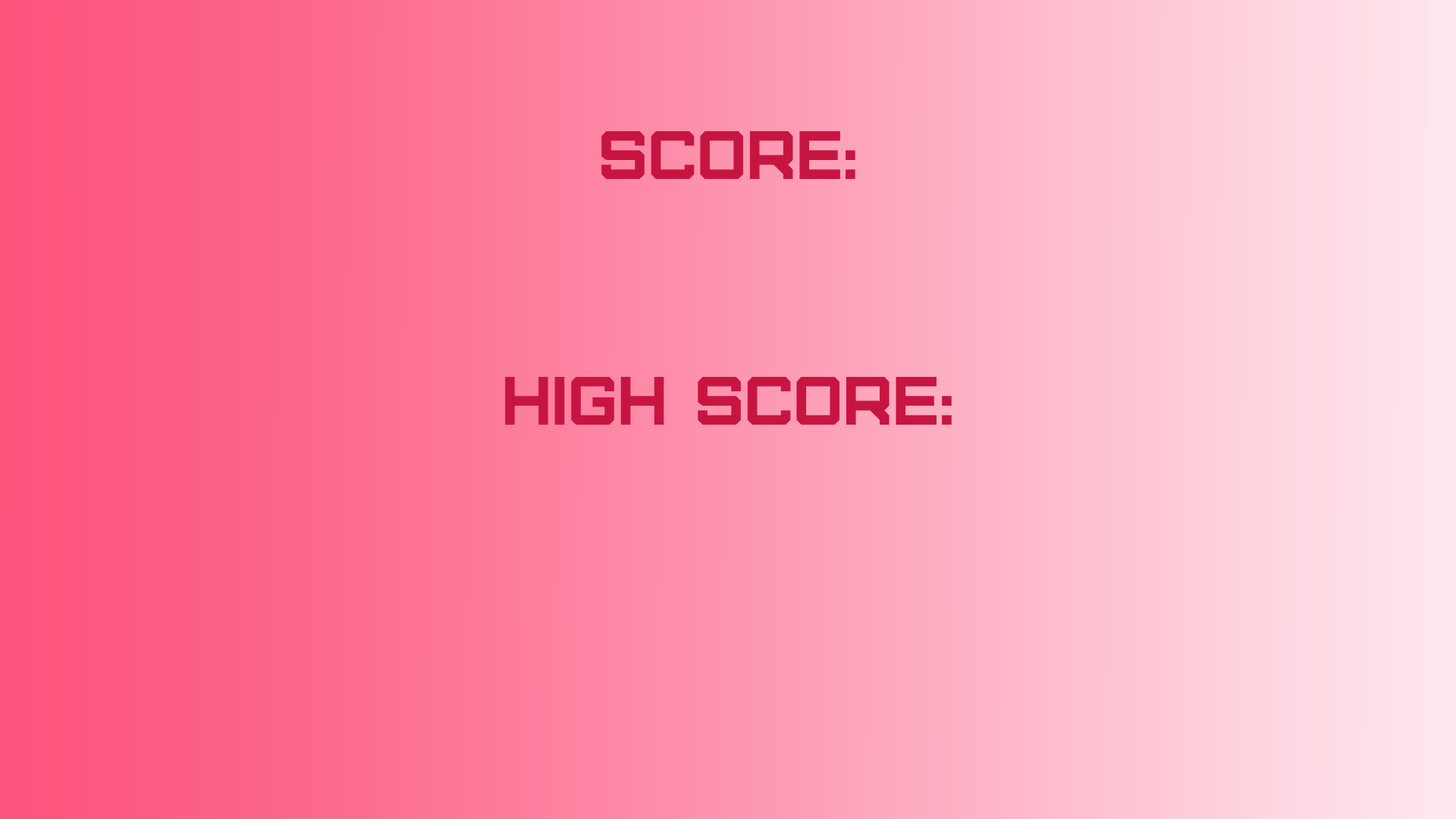
<style>
.page{position:relative;width:1456px;height:819px}
.page>*{position:absolute;margin:0}
.t1{font:68.2px "Furore";color:#c71541}
</style>
<div class="page">
<p class="t1" style="left:505px;top:131px;width:447px;height:294px;text-align:center">score:<br><br><br>high score:</p>
</div>
